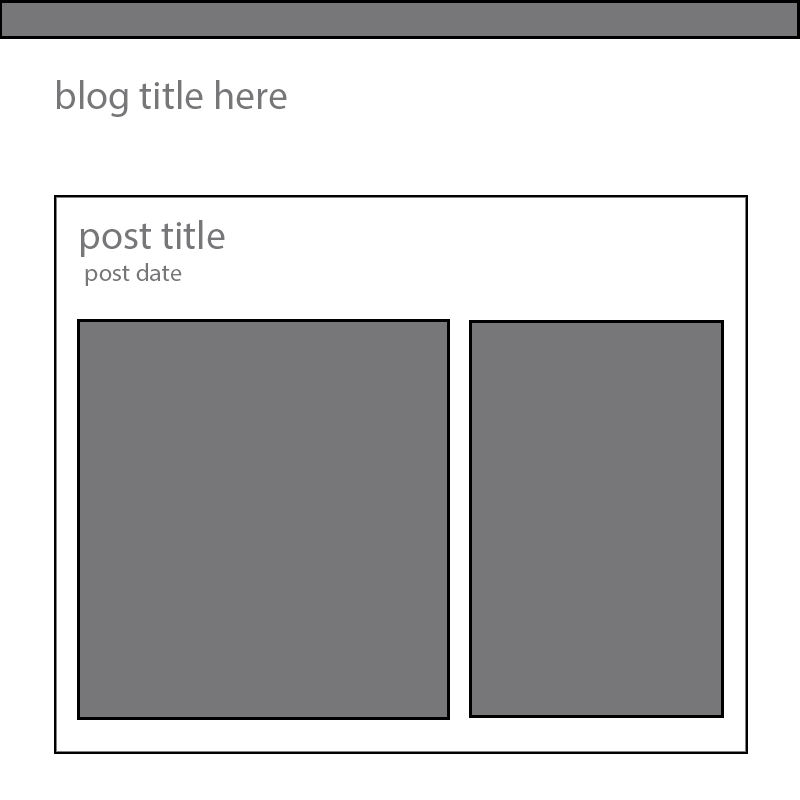
<style>
.page{position:relative;width:800px;height:800px;background:#ffffff}
.page>*{position:absolute;margin:0}
.t1{font:40px "MyriadPro-Regular";color:#77777a}
.t2{font:25px "MyriadPro-Regular";color:#77777a}
</style>
<div class="page">
<p class="t1" style="left:56px;top:80px;width:231px;height:37px">blog title here</p>
<p class="t1" style="left:80px;top:220px;width:145px;height:37px">post title</p>
<p class="t2" style="left:85px;top:263px;width:97px;height:23px">post date</p>
</div>
